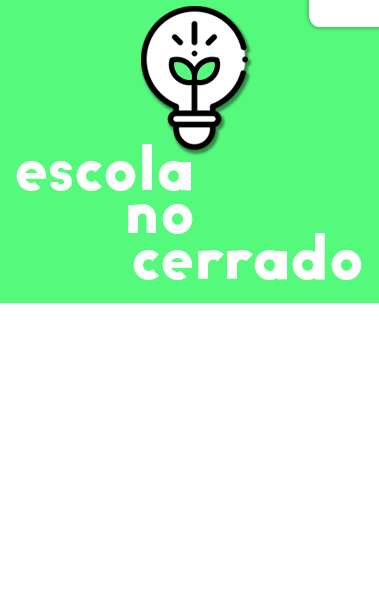
<style>
.page{position:relative;width:379px;height:591px;background:#ffffff}
.page>*{position:absolute;margin:0}
.t1{font:61.2px "BigJohnPRO-Bold";color:#ffffff}
</style>
<div class="page">
<p class="t1" style="left:16px;top:144px;width:175px;height:47px">escola</p>
<p class="t1" style="left:128px;top:204px;width:65px;height:30px">no</p>
<p class="t1" style="left:133px;top:233px;width:229px;height:47px">cerrado</p>
</div>
